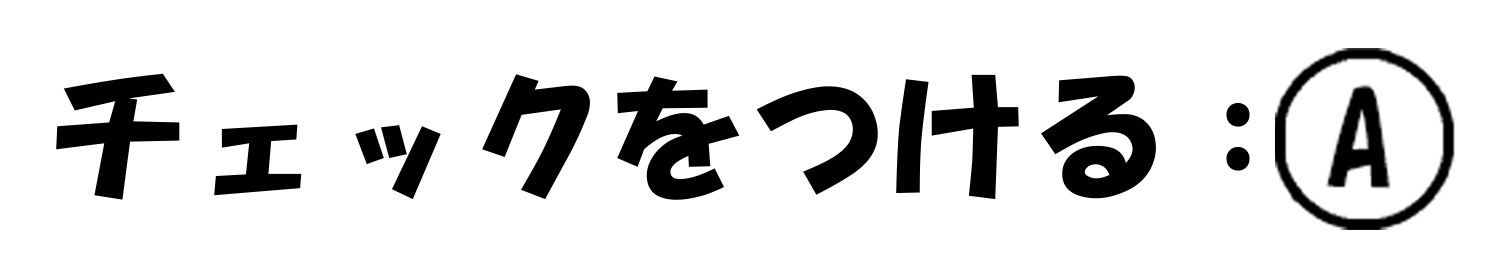
<style>
.page{position:relative;width:1496px;height:280px;background:#ffffff}
.page>*{position:absolute;margin:0}
.t1{font:140px "HGSoeiKakupoptai";color:#000000}
</style>
<div class="page">
<p class="t1" style="left:56px;top:73px;width:1194px;height:127px">チェックをつける：</p>
</div>
